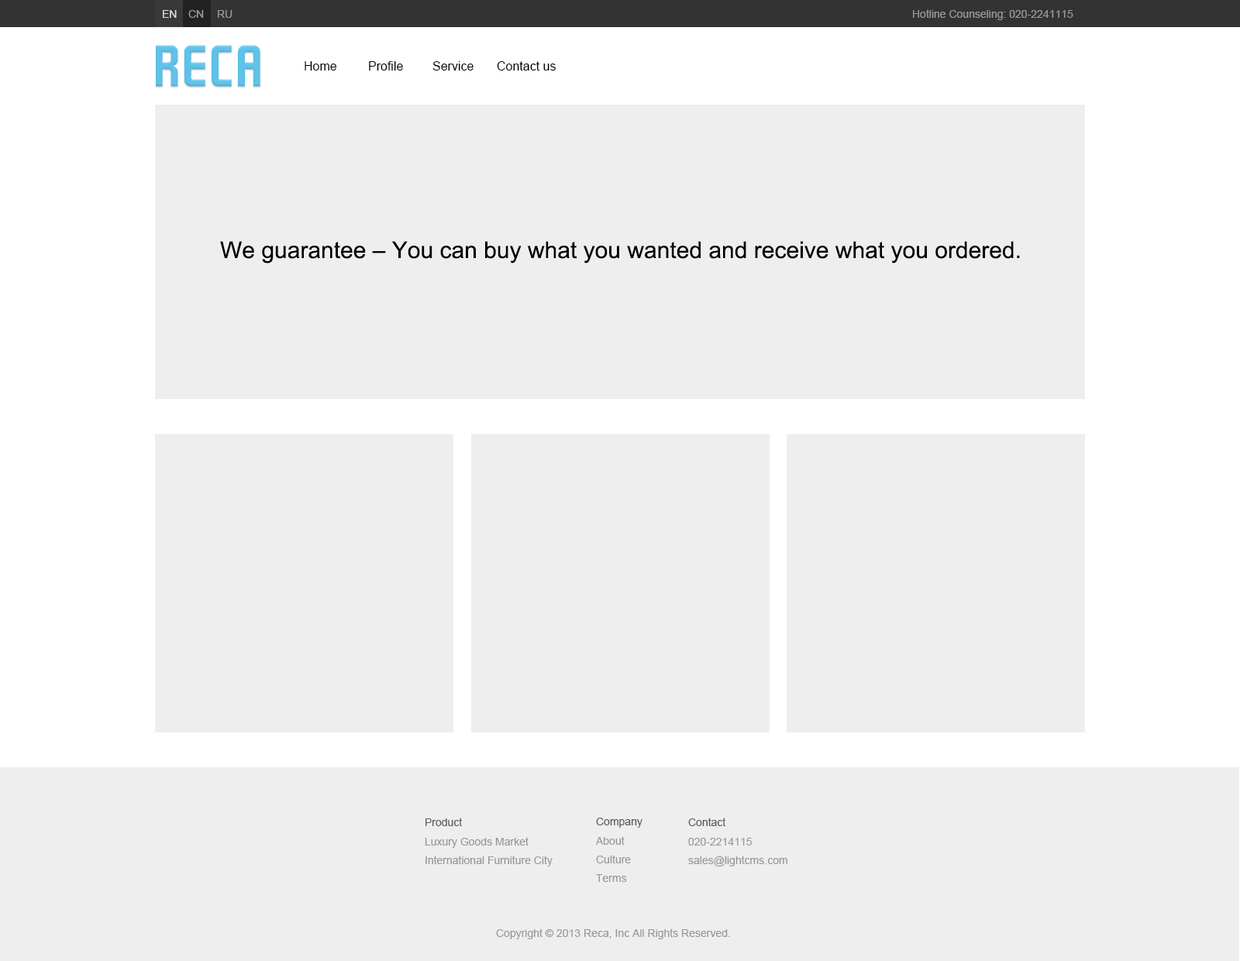
<style>
.page{position:relative;width:1240px;height:961px;background:#eeeeee}
.page>*{position:absolute;margin:0}
.t1{font:10.9px "ArialMT";color:#dddddd}
.t2{font:10.9px "ArialMT";color:#999999}
.t3{font:47.1px "GRAYSTROKE";color:#5fc2e9}
.t4{font:12.4px "ArialMT";color:#000000}
.t5{font:23.3px "ArialMT";color:#000000}
.t6{font:10.9px "ArialMT";color:#5b5b5b}
</style>
<div class="page">
<p class="t1" style="left:163px;top:10px;width:14px;height:8px">EN</p>
<p class="t2" style="left:188px;top:10px;width:16px;height:8px">CN</p>
<p class="t2" style="left:218px;top:10px;width:15px;height:8px">RU</p>
<p class="t2" style="left:913px;top:9px;width:161px;height:11px">Hotline Counseling: 020-2241115</p>
<p class="t3" style="left:156px;top:45px;width:104px;height:42px">RECA</p>
<p class="t4" style="left:305px;top:61px;width:32px;height:10px">Home</p>
<p class="t4" style="left:369px;top:61px;width:34px;height:10px">Profile</p>
<p class="t4" style="left:433px;top:61px;width:41px;height:10px">Service</p>
<p class="t4" style="left:497px;top:61px;width:59px;height:10px">Contact us</p>
<p class="t5" style="left:220px;top:241px;width:800px;height:23px">We guarantee – You can buy what you wanted and receive what you ordered.</p>
<p class="t6" style="left:426px;top:818px;width:37px;height:8px">Product</p>
<p class="t6" style="left:596px;top:818px;width:47px;height:10px">Company</p>
<p class="t6" style="left:688px;top:818px;width:38px;height:8px">Contact</p>
<p class="t2" style="left:425px;top:837px;width:104px;height:11px">Luxury Goods Market</p>
<p class="t2" style="left:596px;top:837px;width:29px;height:8px">About</p>
<p class="t2" style="left:688px;top:838px;width:64px;height:8px">020-2214115</p>
<p class="t2" style="left:426px;top:856px;width:127px;height:11px">International Furniture City</p>
<p class="t2" style="left:596px;top:855px;width:35px;height:9px">Culture</p>
<p class="t2" style="left:688px;top:856px;width:100px;height:11px">sales@lightcms.com</p>
<p class="t2" style="left:596px;top:874px;width:31px;height:8px">Terms</p>
<p class="t2" style="left:496px;top:929px;width:234px;height:11px">Copyright © 2013 Reca, Inc All Rights Reserved.</p>
</div>
